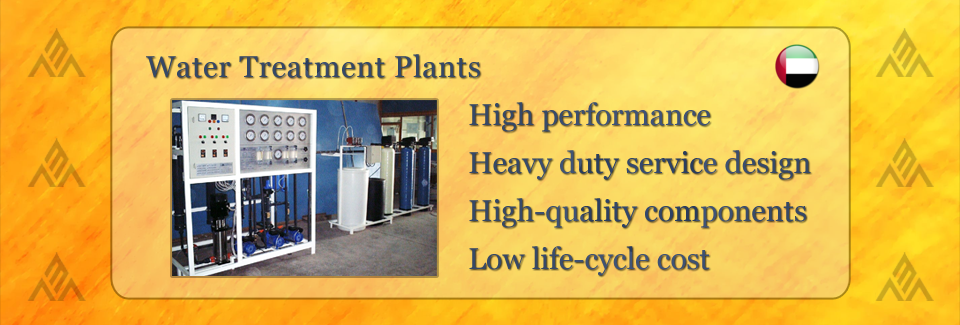
<style>
.page{position:relative;width:960px;height:325px}
.page>*{position:absolute;margin:0}
.t1{font:30px "Georgia";letter-spacing:0.025em;color:#364866}
.t2{font:30px/48px "Georgia";color:#374969}
</style>
<div class="page">
<p class="t1" style="left:146px;top:54px;width:334px;height:24px">Water Treatment Plants</p>
<p class="t2" style="left:469px;top:102px;width:342px;height:174px">High performance<br>Heavy duty service design<br>High-quality components<br>Low life-cycle cost</p>
</div>
